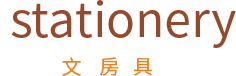
<style>
.page{position:relative;width:236px;height:76px;background:#ffffff}
.page>*{position:absolute;margin:0}
.t1{font:48px "NotoSansCJKtc-Regular";color:#924b2e}
.t2{font:20px "NotoSansCJKtc-Regular";color:#eb811f}
</style>
<div class="page">
<p class="t1" style="left:11px;top:0px;width:225px;height:48px">stationery</p>
<p class="t2" style="left:62px;top:57px;width:90px;height:19px">文    房   具</p>
</div>
